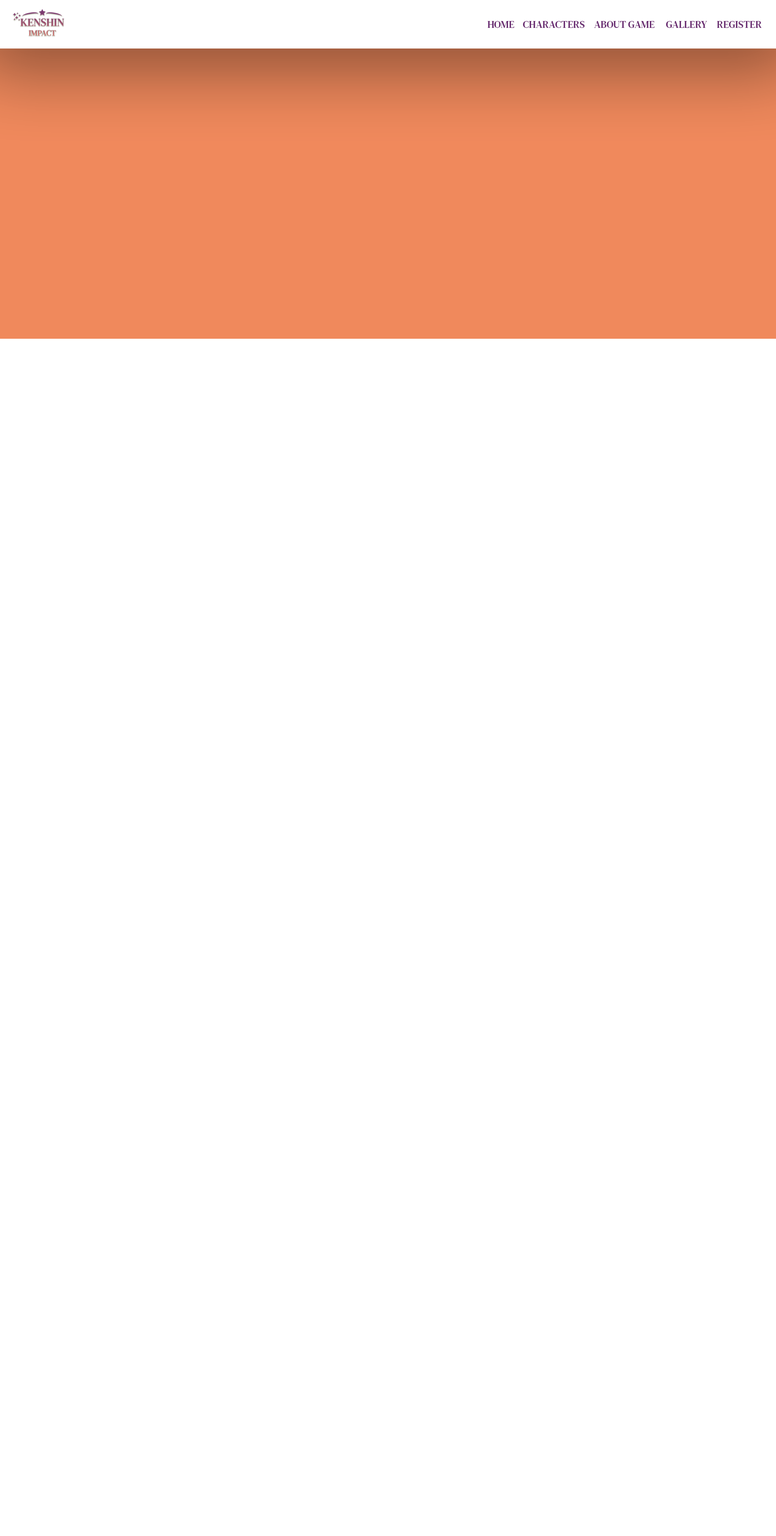
<style>
.page{position:relative;width:776px;height:1536px;background:#ffffff}
.page>*{position:absolute;margin:0}
.t1{font:10.3px "DMSerifText-Regular";color:#692c71}
</style>
<div class="page">
<p class="t1" style="left:488px;top:21px;width:27px;height:7px">HOME</p>
<p class="t1" style="left:523px;top:21px;width:62px;height:7px">CHARACTERS</p>
<p class="t1" style="left:594px;top:21px;width:61px;height:7px">ABOUT GAME</p>
<p class="t1" style="left:666px;top:21px;width:41px;height:7px">GALLERY</p>
<p class="t1" style="left:717px;top:21px;width:45px;height:7px">REGISTER</p>
</div>
